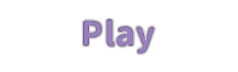
<style>
.page{position:relative;width:238px;height:72px;background:#ffffff}
.page>*{position:absolute;margin:0}
.t1{font:33.9px "Corporate-Logo-Rounded";color:#9b81c0}
</style>
<div class="page">
<p class="t1" style="left:83px;top:19px;width:72px;height:35px">Play</p>
</div>
